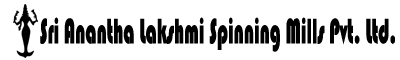
<style>
.page{position:relative;width:400px;height:60px;background:#ffffff}
.page>*{position:absolute;margin:0}
.t1{font:36.5px "Bauhaus93";color:#000000;scale:0.52 1}
</style>
<div class="page">
<p class="t1" style="left:40px;top:17px;width:355px;height:35px">Sri Anantha Lakshmi Spinning Mills Pvt. Ltd.</p>
</div>
